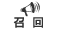
<style>
.page{position:relative;width:58px;height:29px;background:#ffffff}
.page>*{position:absolute;margin:0}
.t1{font:11px "MicrosoftYaHei";letter-spacing:0.01em;color:#333333;font-weight:bold}
</style>
<div class="page">
<p class="t1" style="left:13px;top:17px;width:30px;height:11px">召  回</p>
</div>
